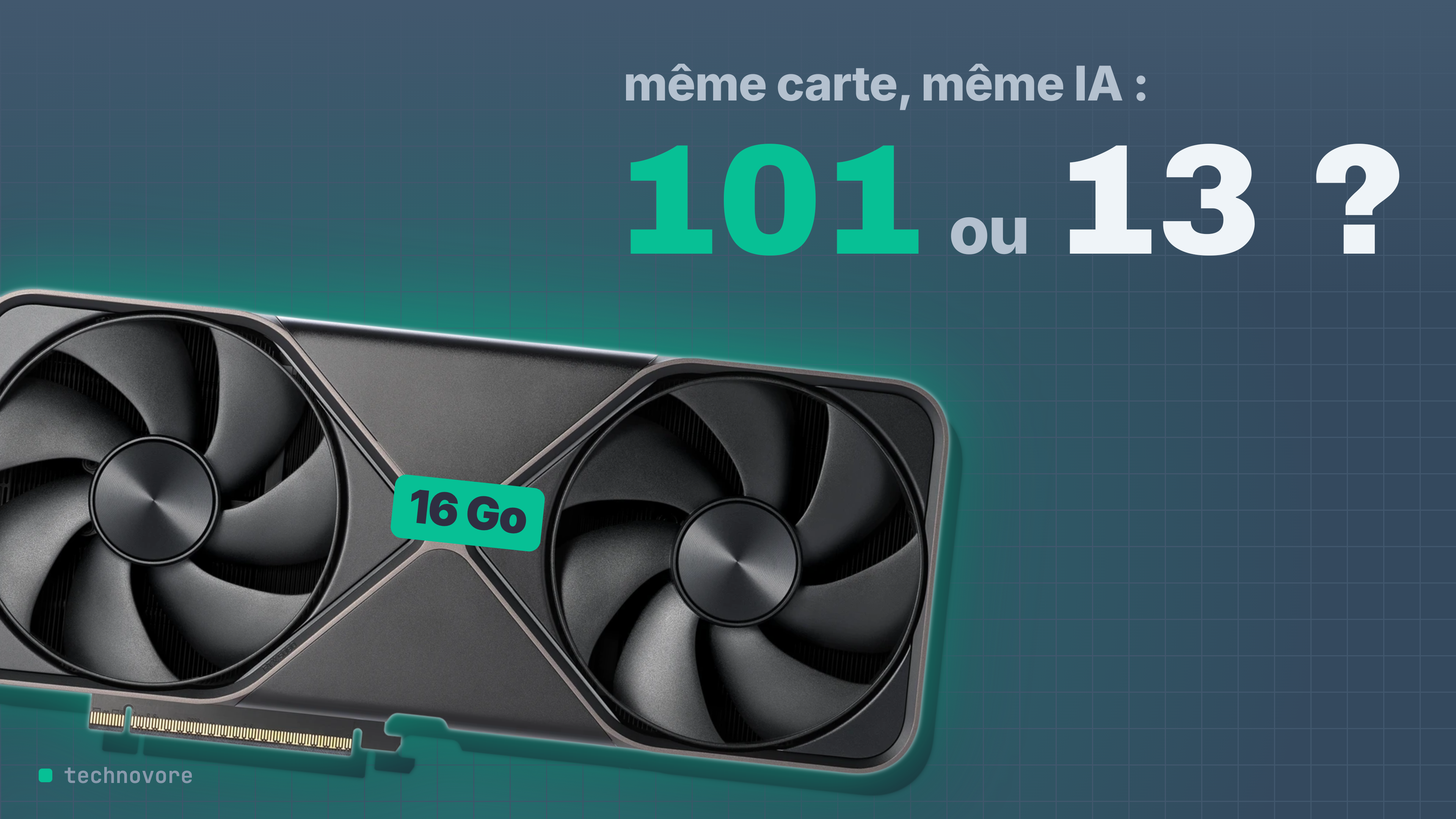
<style>
.page{position:relative;width:1456px;height:819px}
.page>*{position:absolute;margin:0}
.t1{font:47.8px "Inter-ExtraBold";letter-spacing:-0.015em;color:#b4c1cf}
.t2{font:157px "ArchivoBlack-Regular";letter-spacing:-0.01em;color:#07c095}
.t3{font:157px "ArchivoBlack-Regular";letter-spacing:-0.01em;color:#eff4f8}
.t4{font:65.9px "Inter-ExtraBold";letter-spacing:-0.024em;color:#b4c1cf}
</style>
<div class="page">
<p class="t1" style="left:626px;top:64px;width:520px;height:47px">même carte, même IA :</p>
<p class="t2" style="left:630px;top:144px;width:289px;height:112px">101</p>
<p class="t3" style="left:1069px;top:144px;width:331px;height:112px">13 ?</p>
<p class="t4" style="left:951px;top:217px;width:76px;height:38px">ou</p>
</div>
